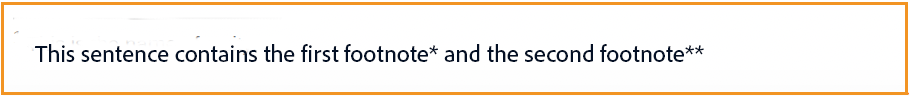
<style>
.page{position:relative;width:910px;height:96px;background:#ffffff}
.page>*{position:absolute;margin:0}
.t1{font:24px "AdobeClean-Medium";color:#041025}
</style>
<div class="page">
<p class="t1" style="left:34px;top:44px;width:670px;height:18px">This sentence contains the first footnote* and the second footnote**</p>
</div>
